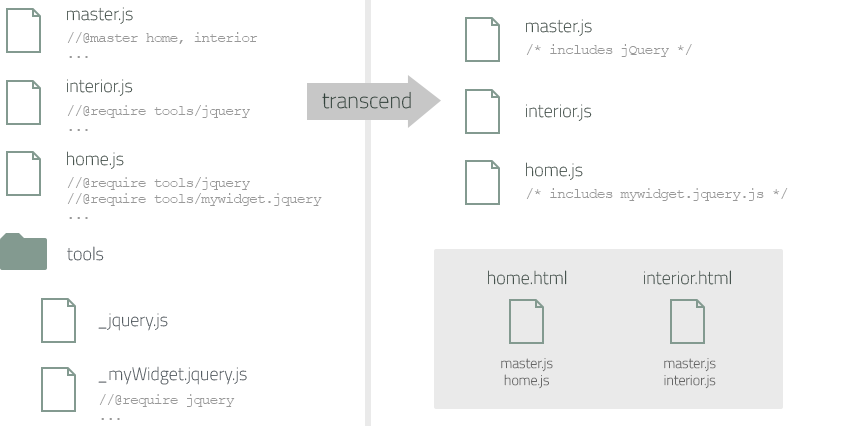
<style>
.page{position:relative;width:850px;height:427px;background:#ffffff}
.page>*{position:absolute;margin:0}
.t1{font:18px "TitilliumWeb-Thin"}
.t2{font:15px/16px "CourierNewPSMT";letter-spacing:-0.07em;color:#999999}
.t3{font:15px "CourierNewPSMT";letter-spacing:-0.07em;color:#999999}
.t4{font:22px "TitilliumWeb-Thin";color:#32433c}
.t5{font:14px "TitilliumWeb-Thin";color:#666666}
</style>
<div class="page">
<p class="t1" style="left:67px;top:7px;width:66px;height:17px">master.js</p>
<p class="t1" style="left:526px;top:19px;width:66px;height:17px">master.js</p>
<p class="t2" style="left:67px;top:32px;width:191px;height:26px">//@master home, interior<br>...</p>
<p class="t3" style="left:526px;top:44px;width:166px;height:13px">/* includes jQuery */</p>
<p class="t1" style="left:67px;top:79px;width:66px;height:17px">interior.js</p>
<p class="t4" style="left:322px;top:91px;width:89px;height:18px">transcend</p>
<p class="t2" style="left:67px;top:105px;width:183px;height:26px">//@require tools/jquery<br>...</p>
<p class="t1" style="left:526px;top:104px;width:66px;height:17px">interior.js</p>
<p class="t1" style="left:67px;top:151px;width:57px;height:18px">home.js</p>
<p class="t1" style="left:526px;top:162px;width:57px;height:18px">home.js</p>
<p class="t2" style="left:67px;top:177px;width:255px;height:42px">//@require tools/jquery<br>//@require tools/mywidget.jquery<br>...</p>
<p class="t3" style="left:526px;top:188px;width:262px;height:13px">/* includes mywidget.jquery.js */</p>
<p class="t1" style="left:67px;top:246px;width:37px;height:15px">tools</p>
<p class="t1" style="left:488px;top:270px;width:79px;height:15px">home.html</p>
<p class="t1" style="left:644px;top:270px;width:87px;height:15px">interior.html</p>
<p class="t1" style="left:98px;top:313px;width:70px;height:18px">_jquery.js</p>
<p class="t1" style="left:98px;top:366px;width:149px;height:19px">_myWidget.jquery.js</p>
<p class="t5" style="left:501px;top:358px;width:52px;height:31px;text-align:center">master.js<br>home.js</p>
<p class="t5" style="left:664px;top:358px;width:52px;height:31px;text-align:center">master.js<br>interior.js</p>
<p class="t2" style="left:99px;top:394px;width:136px;height:26px">//@require jquery<br>...</p>
</div>
